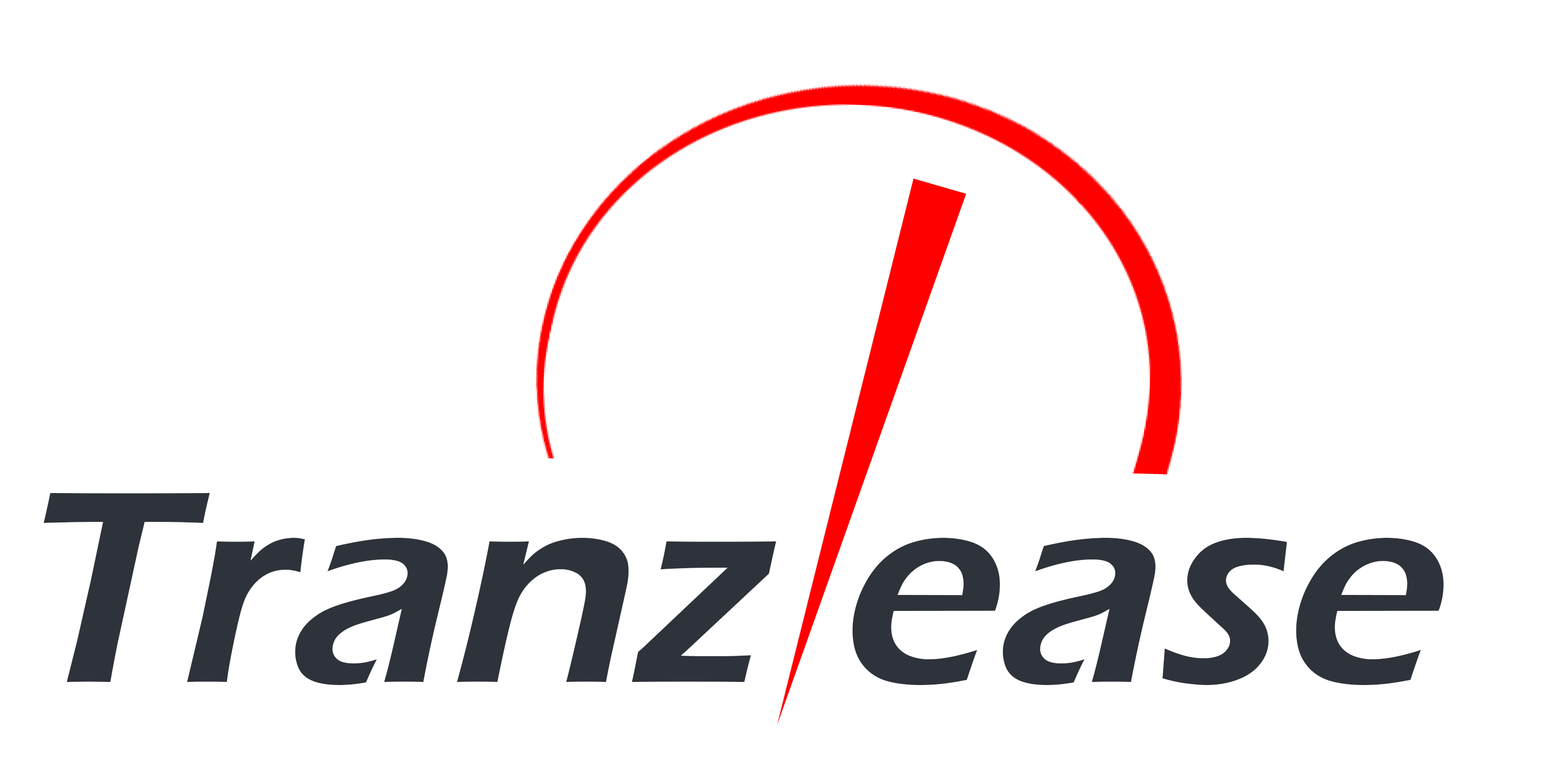
<style>
.page{position:relative;width:1544px;height:772px;background:#ffffff}
.page>*{position:absolute;margin:0}
.t1{font:283.1px "ErasITC-Demi";color:#2e323a;font-style:italic}
</style>
<div class="page">
<p class="t1" style="left:43px;top:493px;width:1401px;height:192px">Tranz ease</p>
</div>
